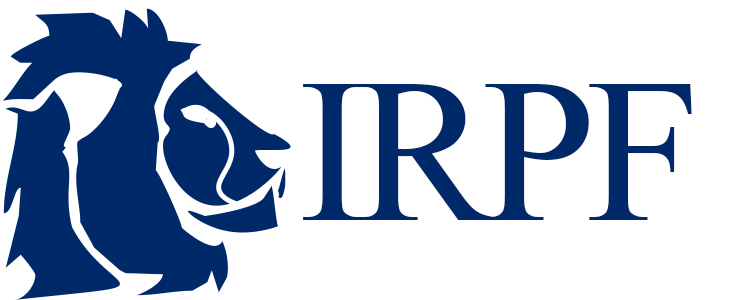
<style>
.page{position:relative;width:736px;height:300px;background:#ffffff}
.page>*{position:absolute;margin:0}
.t1{font:205px "TimesNewRomanPSMT";letter-spacing:-0.05em;color:#002969}
</style>
<div class="page">
<p class="t1" style="left:303px;top:84px;width:389px;height:136px">IRPF</p>
</div>
